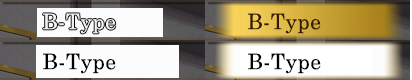
<style>
.page{position:relative;width:412px;height:80px;background:#fcfcfc}
.page>*{position:absolute;margin:0}
.t1{font:21.3px "CenturySchoolbook";letter-spacing:0.025em;color:#321a02}
.t2{font:21.3px "CenturySchoolbook";letter-spacing:0.025em;color:#000000}
</style>
<div class="page">
<p class="t1" style="left:248px;top:13px;width:73px;height:21px">B-Type</p>
<p class="t2" style="left:43px;top:53px;width:73px;height:21px">B-Type</p>
<p class="t2" style="left:248px;top:53px;width:73px;height:21px">B-Type</p>
</div>
